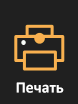
<style>
.page{position:relative;width:78px;height:104px;background:#202020}
.page>*{position:absolute;margin:0}
.t1{font:12px "Calibri-Bold";color:#ffffff}
</style>
<div class="page">
<p class="t1" style="left:16px;top:82px;width:48px;height:11px">Печать</p>
</div>
